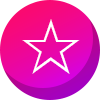
<style>
.page{position:relative;width:100px;height:100px;background:#ffffff}
.page>*{position:absolute;margin:0}
.t1{font:64px "SimSun";color:#ffffff}
</style>
<div class="page">
<p class="t1" style="left:22px;top:19px;width:58px;height:55px">☆</p>
</div>
